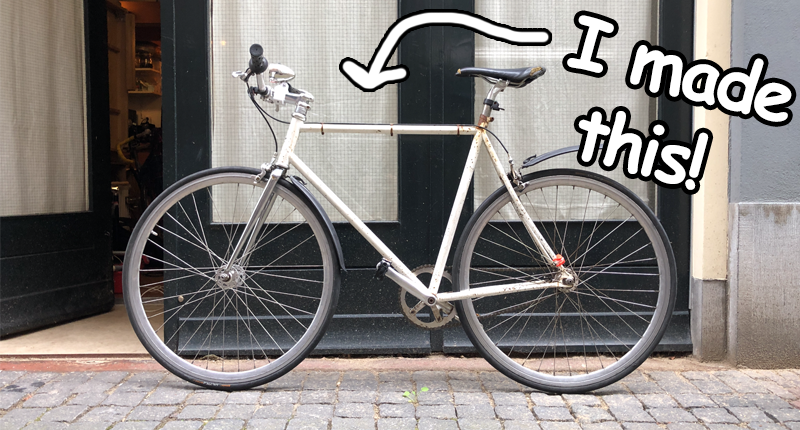
<style>
.page{position:relative;width:800px;height:430px}
.page>*{position:absolute;margin:0}
.t1{font:72px "ComicSansMS-Bold";letter-spacing:-0.05em;color:#ffffff}
</style>
<div class="page">
<p class="t1" style="left:567px;top:15px;width:225px;height:175px;rotate:15deg">I made<br> this!</p>
</div>
